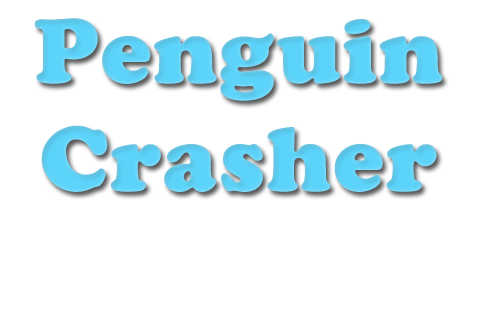
<style>
.page{position:relative;width:480px;height:320px;background:#ffffff}
.page>*{position:absolute;margin:0}
.t1{font:90px "CooperBlackStd";color:#5cd3fa;font-weight:bold}
</style>
<div class="page">
<p class="t1" style="left:34px;top:18px;width:409px;height:174px;text-align:center">Penguin<br>Crasher</p>
</div>
